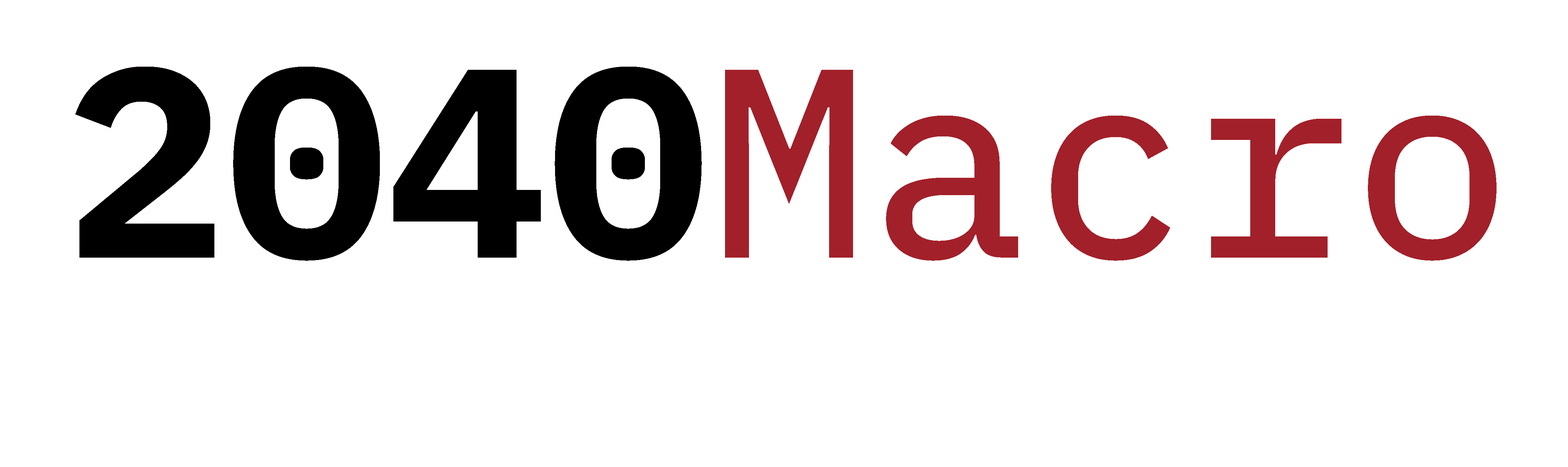
<style>
.page{position:relative;width:1568px;height:467px;background:#ffffff}
.page>*{position:absolute;margin:0}
.t1{font:268px "IBMPlexMono-Bold";color:#000000}
.t2{font:268px "IBMPlexMono-Text"}
</style>
<div class="page">
<p class="t1" style="left:75px;top:67px;width:627px;height:194px">2040</p>
<p class="t2" style="left:81px;top:67px;width:1416px;height:194px">2040Macro</p>
</div>
